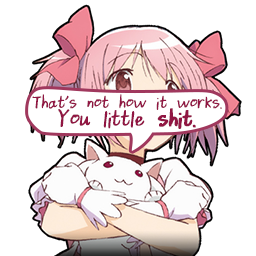
<style>
.page{position:relative;width:256px;height:256px;background:#ffffff}
.page>*{position:absolute;margin:0}
.t1{font:24px/19px "DaintyDaisies";color:#911643}
.t2{font:31px/19px "DaintyDaisies";color:#911643}
.t3{font:31px/19px "DaintyDaisies";color:#911643;font-weight:bold}
</style>
<div class="page">
<p class="t1" style="left:32px;top:94px;width:190px;height:35px;text-align:center">That's not how it works.<br><span class="t2">You little </span><span class="t3">shit.</span></p>
</div>
